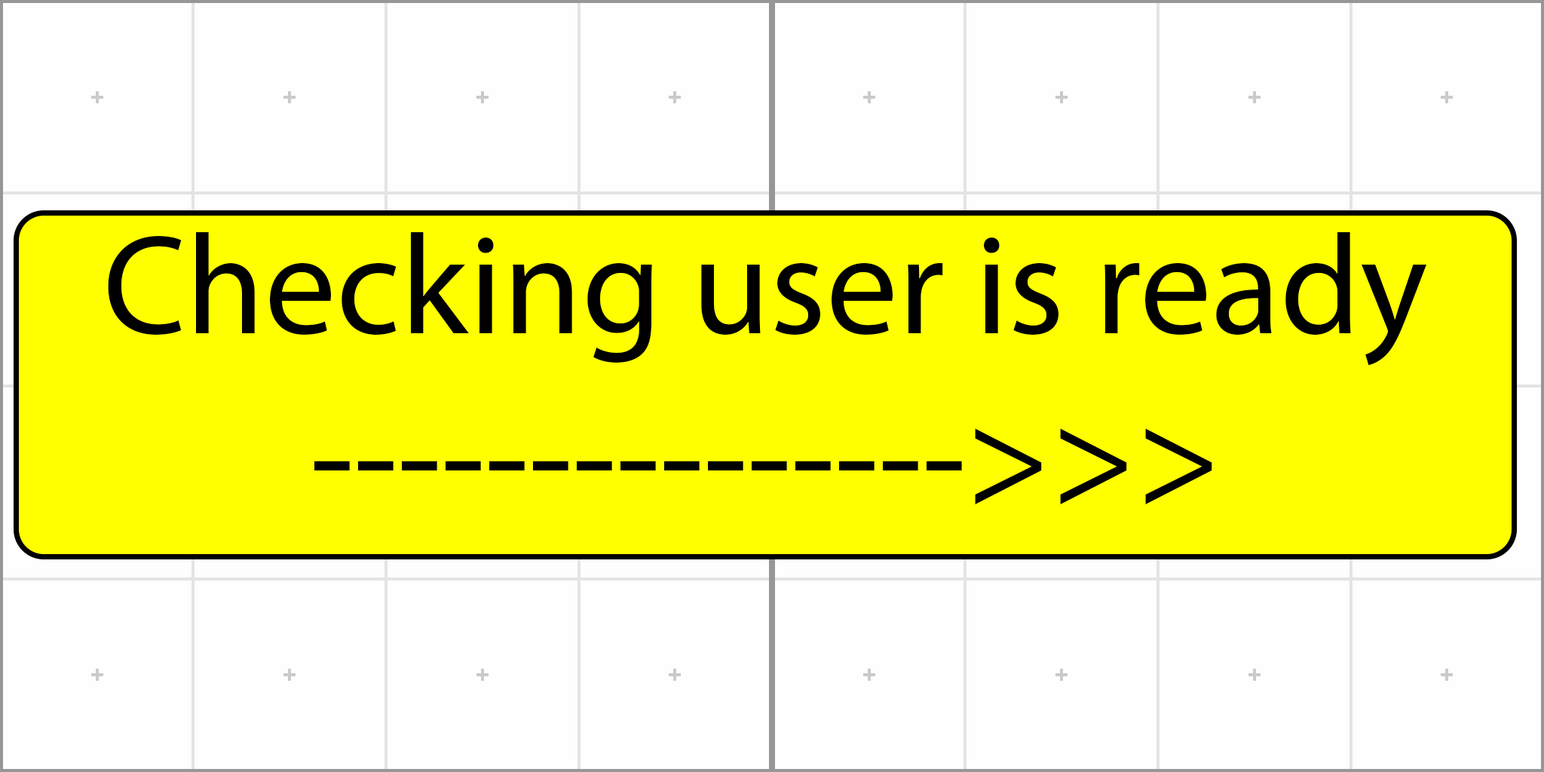
<style>
.page{position:relative;width:1544px;height:772px;background:#fefefe}
.page>*{position:absolute;margin:0}
.t1{font:142.5px "MyriadPro-Regular";color:#000000}
</style>
<div class="page">
<p class="t1" style="left:108px;top:232px;width:1319px;height:272px;text-align:center">Checking user is ready<br>---------------&gt;&gt;&gt;</p>
</div>
